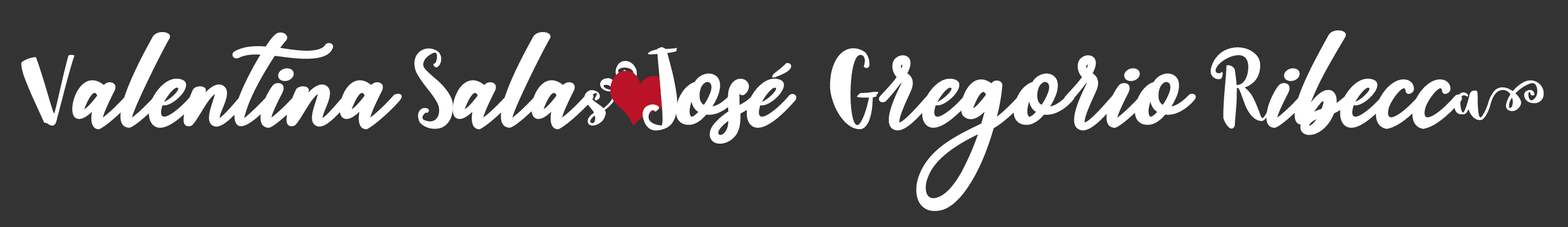
<style>
.page{position:relative;width:1568px;height:227px;background:#333333}
.page>*{position:absolute;margin:0}
.t1{font:103.7px "sophia-script";letter-spacing:-0.01em;color:#ffffff}
.t2{font:103.7px "SophiaLeft";letter-spacing:-0.01em;color:#ffffff}
.t3{font:103.7px "SophiaRight";letter-spacing:-0.01em;color:#ffffff}
.t4{font:103.7px/81.2px "sophia-script";letter-spacing:-0.01em;color:#ffffff}
.t5{font:103.7px/81.2px "SophiaLeft";letter-spacing:-0.01em;color:#ffffff}
.t6{font:103.7px/81.2px "SophiaRight";letter-spacing:-0.01em;color:#ffffff}
</style>
<div class="page">
<p class="t1" style="left:21px;top:32px;width:616px;height:98px"><span class="t2">V</span>alentina <span class="t2">S</span>ala<span class="t3">s</span></p>
<p class="t4" style="left:643px;top:30px;width:901px;height:181px;text-align:center"><span class="t5">J</span>osé  <span class="t5">G</span>regorio <span class="t5">R</span>ibecc<span class="t6">a</span></p>
</div>
